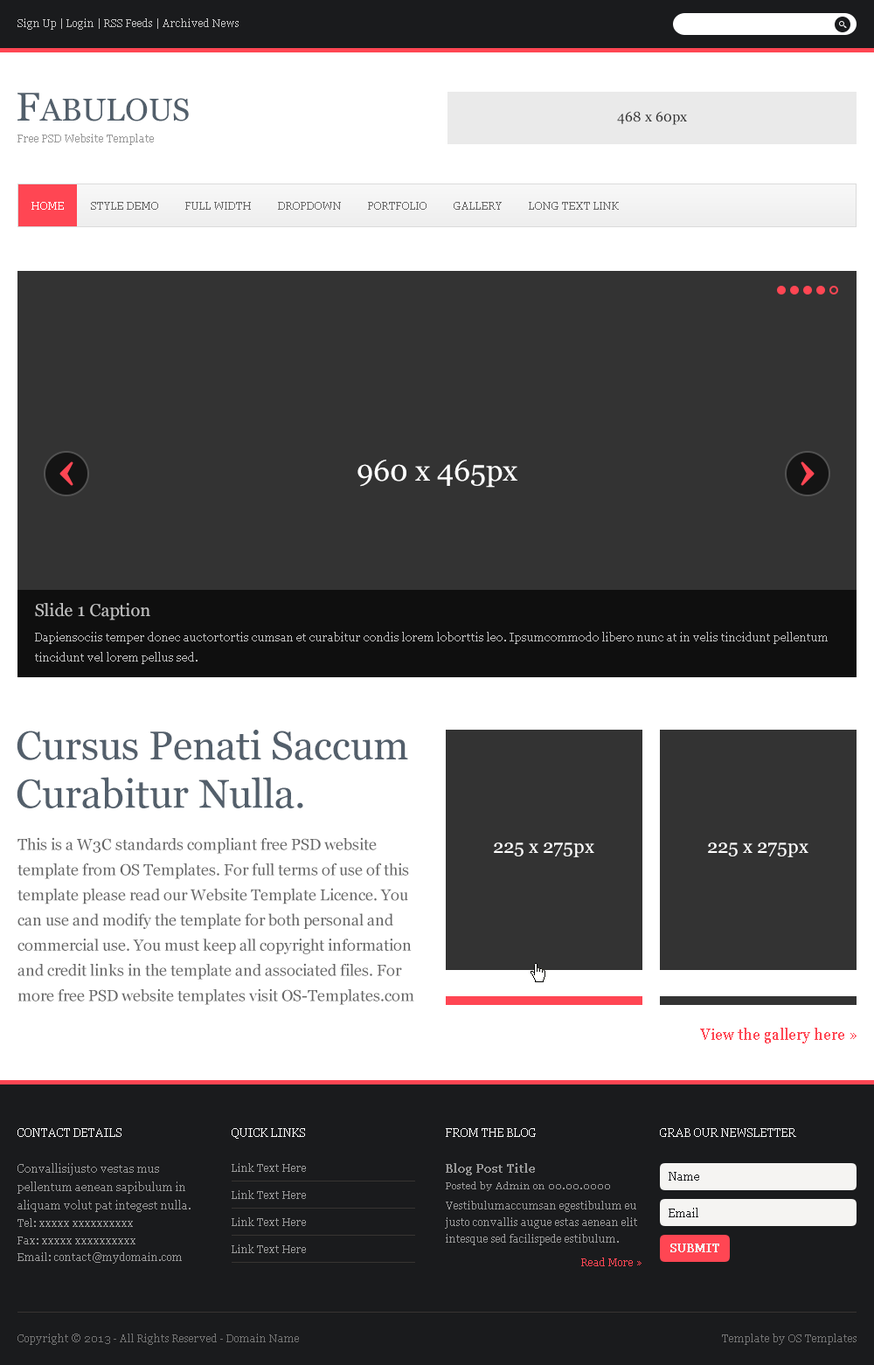
<style>
.page{position:relative;width:874px;height:1365px;background:#333333}
.page>*{position:absolute;margin:0}
.t1{font:10.5px "Georgia";color:#c4c4c4}
.t2{font:31.5px "Georgia";color:#525f6b}
.t3{font:40.2px "Georgia";color:#525f6b}
.t4{font:14px "Georgia";color:#333333}
.t5{font:10.5px "Georgia";color:#999999}
.t6{font:10.5px "Georgia";color:#ffffff}
.t7{font:10.5px "Georgia";color:#666666}
.t8{font:29.7px "Georgia";color:#ffffff}
.t9{font:17.5px "Georgia";color:#c2c2c2}
.t10{font:11.4px/20.4px "Georgia";color:#c0c0c0}
.t11{font:40.2px/48.2px "Georgia";color:#535f6b}
.t12{font:15.7px/25.2px "Georgia";color:#666666}
.t13{font:19.2px "Georgia";color:#ffffff}
.t14{font:15.7px "Georgia";color:#ff4653}
.t15{font:11.4px "Georgia";color:#ffffff}
.t16{font:11.4px/18.2px "Georgia";color:#999999}
.t17{font:10.5px/18.2px "Georgia";color:#999999}
.t18{font:10.5px/16.8px "Georgia";color:#999999}
.t19{font:11.4px "Georgia";color:#999999;font-weight:bold}
.t20{font:9.6px "Georgia";color:#999999}
.t21{font:11.4px "Georgia";color:#1a1b1d}
.t22{font:11.4px "Georgia";color:#f5f4f2;font-weight:bold}
.t23{font:10.5px "Georgia";color:#ff4653}
.t24{font:10.5px "Georgia";color:#737373}
</style>
<div class="page">
<p class="t1" style="left:17px;top:18px;width:222px;height:12px">Sign Up | Login | RSS Feeds | Archived News</p>
<p class="t2" style="left:17px;top:93px;width:172px;height:28px"><span class="t3">F</span>ABULOUS</p>
<p class="t4" style="left:617px;top:111px;width:70px;height:14px">468 x 60px</p>
<p class="t5" style="left:17px;top:134px;width:137px;height:11px">Free PSD Website Template</p>
<p class="t6" style="left:31px;top:202px;width:33px;height:8px">HOME</p>
<p class="t7" style="left:91px;top:202px;width:67px;height:8px">STYLE DEMO</p>
<p class="t7" style="left:185px;top:202px;width:66px;height:8px">FULL WIDTH</p>
<p class="t7" style="left:278px;top:202px;width:63px;height:8px">DROPDOWN</p>
<p class="t7" style="left:368px;top:202px;width:58px;height:8px">PORTFOLIO</p>
<p class="t7" style="left:453px;top:202px;width:49px;height:8px">GALLERY</p>
<p class="t7" style="left:529px;top:202px;width:90px;height:8px">LONG TEXT LINK</p>
<p class="t8" style="left:357px;top:460px;width:160px;height:28px">960 x 465px</p>
<p class="t9" style="left:35px;top:603px;width:115px;height:17px">Slide 1 Caption</p>
<p class="t10" style="left:35px;top:632px;width:792px;height:32px">Dapiensociis temper donec auctortortis cumsan et curabitur condis lorem loborttis leo. Ipsumcommodo libero nunc at in velis tincidunt pellentum tincidunt vel lorem pellus sed.</p>
<p class="t11" style="left:17px;top:730px;width:391px;height:79px">Cursus Penati Saccum <br>Curabitur Nulla.</p>
<p class="t12" style="left:17px;top:837px;width:397px;height:168px">This is a W3C standards compliant free PSD website template from OS Templates. For full terms of use of this template please read our Website Template Licence. You can use and modify the template for both personal and commercial use. You must keep all copyright information and credit links in the template and associated files. For more free PSD website templates visit OS-Templates.com</p>
<p class="t13" style="left:494px;top:842px;width:100px;height:15px">225 x 275px</p>
<p class="t13" style="left:708px;top:842px;width:100px;height:15px">225 x 275px</p>
<p class="t14" style="left:700px;top:1028px;width:156px;height:15px">View the gallery here »</p>
<p class="t15" style="left:17px;top:1128px;width:104px;height:9px">CONTACT DETAILS</p>
<p class="t15" style="left:232px;top:1128px;width:73px;height:10px">QUICK LINKS</p>
<p class="t15" style="left:446px;top:1128px;width:90px;height:9px">FROM THE BLOG</p>
<p class="t15" style="left:660px;top:1128px;width:136px;height:9px">GRAB OUR NEWSLETTER</p>
<p class="t16" style="left:17px;top:1163px;width:173px;height:100px">Convallisijusto vestas mus <br>pellentum aenean sapibulum in <br>aliquam volut pat integest nulla. <br><span class="t17">Tel: xxxxx xxxxxxxxxx<br></span><span class="t18">Fax: xxxxx xxxxxxxxxx<br>Email: contact@mydomain.com</span></p>
<p class="t5" style="left:232px;top:1163px;width:74px;height:9px">Link Text Here</p>
<p class="t19" style="left:446px;top:1163px;width:89px;height:12px">Blog Post Title</p>
<p class="t20" style="left:446px;top:1181px;width:164px;height:10px">Posted by Admin on 00.00.0000</p>
<p class="t21" style="left:668px;top:1172px;width:31px;height:8px">Name</p>
<p class="t5" style="left:232px;top:1190px;width:74px;height:9px">Link Text Here</p>
<p class="t18" style="left:445px;top:1201px;width:192px;height:44px">Vestibulumaccumsan egestibulum eu justo convallis augue estas aenean elit intesque sed facilispede estibulum.</p>
<p class="t5" style="left:232px;top:1217px;width:74px;height:9px">Link Text Here</p>
<p class="t21" style="left:668px;top:1207px;width:30px;height:10px">Email</p>
<p class="t5" style="left:232px;top:1244px;width:74px;height:9px">Link Text Here</p>
<p class="t22" style="left:670px;top:1243px;width:49px;height:9px">SUBMIT</p>
<p class="t23" style="left:581px;top:1257px;width:60px;height:9px">Read More »</p>
<p class="t24" style="left:17px;top:1333px;width:282px;height:12px">Copyright © 2013 - All Rights Reserved - Domain Name</p>
<p class="t24" style="left:722px;top:1333px;width:134px;height:12px">Template by OS Templates</p>
</div>
